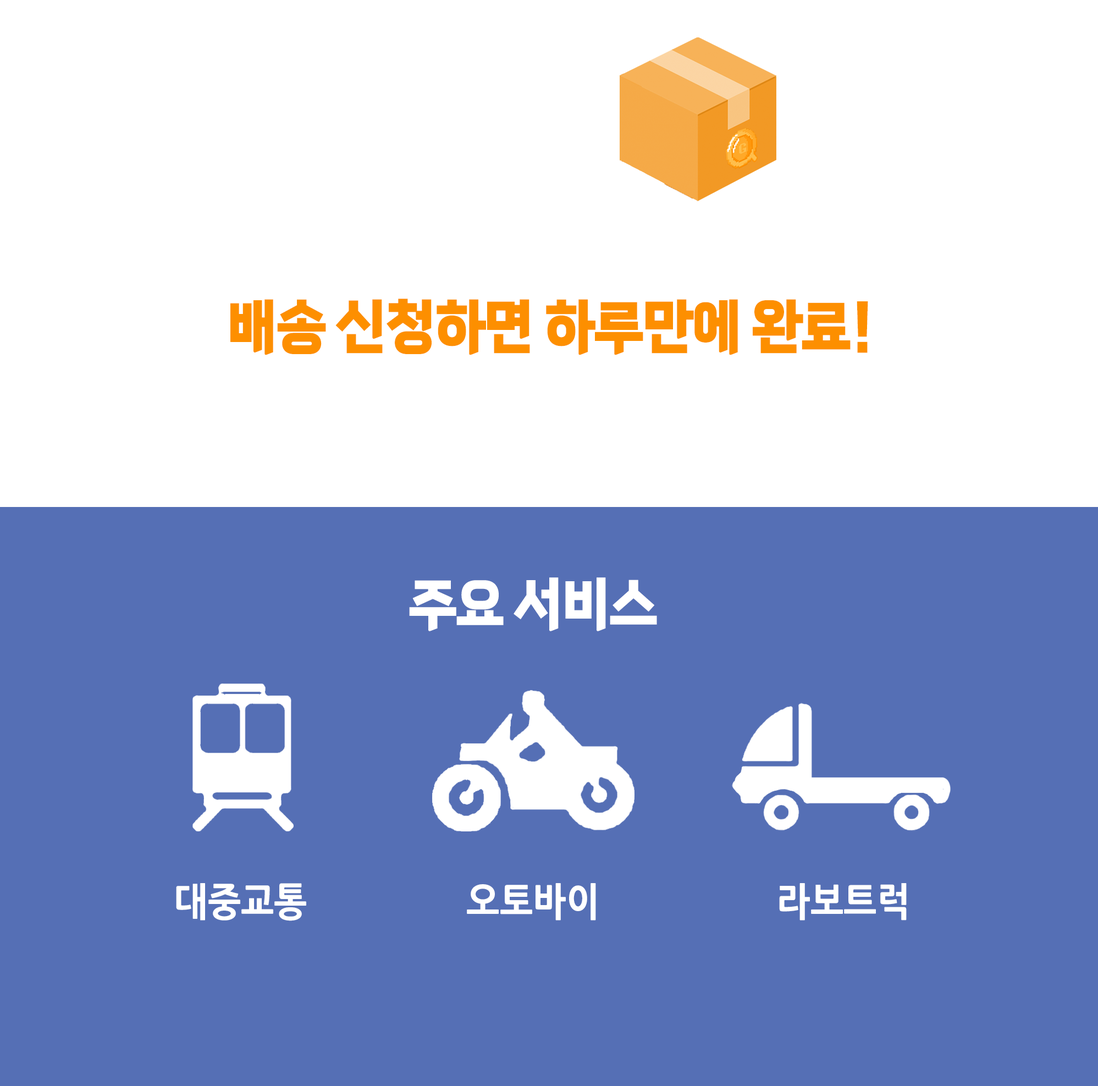
<style>
.page{position:relative;width:1098px;height:1086px;background:#556fb5}
.page>*{position:absolute;margin:0}
.t1{font:59.1px "TheJamsilOTF6ExtraBold";color:#fd8f00;scale:0.91 1}
.t2{font:57.1px "TheJamsilOTF6ExtraBold";color:#ffffff;scale:0.91 1}
.t3{font:38.8px "NanumGothicExtraBold";color:#ffffff;scale:0.91 1}
</style>
<div class="page">
<p class="t1" style="left:230px;top:299px;width:638px;height:56px">배송 신청하면 하루만에 완료!</p>
<p class="t2" style="left:409px;top:577px;width:248px;height:54px">주요 서비스</p>
<p class="t3" style="left:176px;top:883px;width:130px;height:38px">대중교통</p>
<p class="t3" style="left:467px;top:883px;width:129px;height:37px">오토바이</p>
<p class="t3" style="left:779px;top:883px;width:128px;height:37px">라보트럭</p>
</div>
